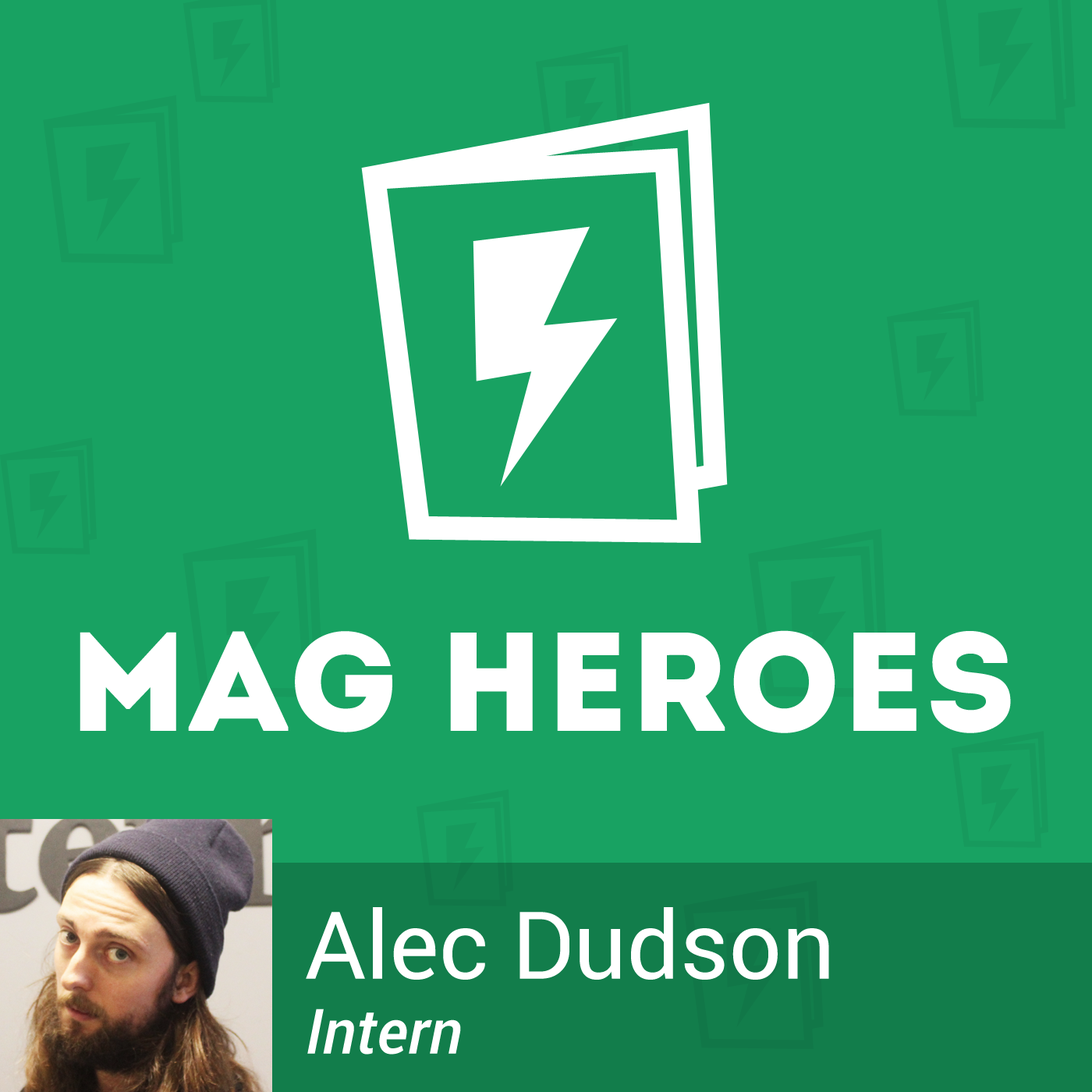
<style>
.page{position:relative;width:1092px;height:1092px;background:#18a262}
.page>*{position:absolute;margin:0}
.t1{font:140.4px "Intro";color:#ffffff}
.t2{font:93.6px/93.6px "Roboto-Regular";color:#ffffff}
.t3{font:62.4px "Roboto-MediumItalic";color:#ffffff}
</style>
<div class="page">
<p class="t1" style="left:80px;top:630px;width:931px;height:103px">Mag Heroes</p>
<p class="t2" style="left:306px;top:907px;width:523px;height:148px">Alec Dudson<br><span class="t3">Intern</span></p>
</div>
